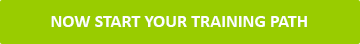
<style>
.page{position:relative;width:360px;height:44px;background:#99cc00}
.page>*{position:absolute;margin:0}
.t1{font:18px "Calibri-Bold";color:#fefefe}
</style>
<div class="page">
<p class="t1" style="left:51px;top:16px;width:256px;height:11px">NOW START YOUR TRAINING PATH</p>
</div>
